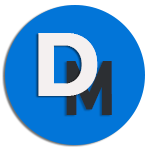
<style>
.page{position:relative;width:150px;height:150px;background:#0275d8}
.page>*{position:absolute;margin:0}
.t1{font:87.5px "Montserrat-Bold";color:#f4f0f0;font-weight:bold;scale:0.91 1}
.t2{font:75px "Montserrat-Bold";color:#2c2f33;font-weight:bold;scale:0.74 1}
</style>
<div class="page">
<p class="t1" style="left:38px;top:33px;width:60px;height:63px">D</p>
<p class="t2" style="left:66px;top:61px;width:46px;height:54px">M</p>
</div>
